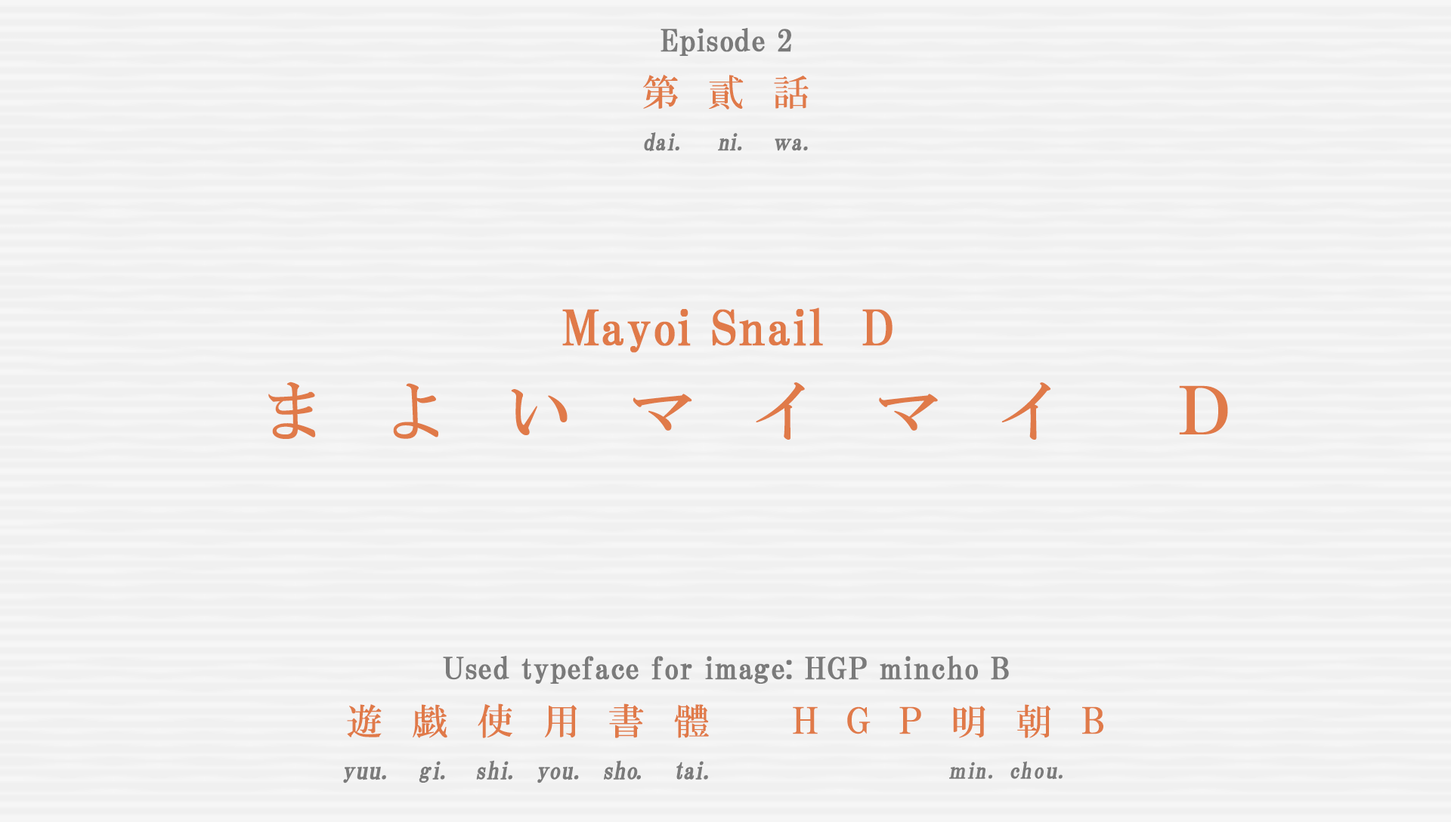
<style>
.page{position:relative;width:1451px;height:822px;background:#f0f0f0}
.page>*{position:absolute;margin:0}
.t1{font:30.2px "HGPMinchoB";letter-spacing:0.01em;color:#7a7a7a;font-weight:bold}
.t2{font:36.5px "HGMinchoB";letter-spacing:0.79em;color:#e07a49}
.t3{font:23.2px "HGMinchoB";letter-spacing:-0.1em;color:#7a7a7a;font-weight:bold;scale:0.96 1}
.t4{font:23.2px "HGMinchoB";color:#7a7a7a;font-weight:bold;scale:0.96 1}
.t5{font:23.2px "HGMinchoB";letter-spacing:-0.075em;color:#7a7a7a;font-weight:bold;scale:0.96 1}
.t6{font:23.2px "HGMinchoB";letter-spacing:0.07em;color:#7a7a7a;font-weight:bold;scale:0.96 1}
.t7{font:23.2px "HGMinchoB";letter-spacing:-0.05em;color:#7a7a7a;font-weight:bold;scale:0.86 1}
.t8{font:48.4px "HGPMinchoB";letter-spacing:0.01em;color:#e07a49;font-weight:bold}
.t9{font:65.7px "HGMinchoB";letter-spacing:0.87em;color:#e07a49}
.t10{font:36.3px "HGMinchoB";letter-spacing:0.81em;color:#e07a49}
.t11{font:36.3px "HGMinchoB";letter-spacing:0.8em;color:#e07a49}
.t12{font:36.3px "HGMinchoB";letter-spacing:0.79em;color:#e07a49}
.t13{font:36.3px "HGMinchoB";letter-spacing:0.71em;color:#e07a49;scale:0.85 1}
.t14{font:36.3px "HGMinchoB";letter-spacing:0.53em;color:#e07a49}
.t15{font:24.2px "HGMinchoB";color:#7a7a7a;font-weight:bold}
.t16{font:24.2px "HGMinchoB";letter-spacing:0.025em;color:#7a7a7a;font-weight:bold;scale:0.96 1}
.t17{font:24.2px "HGMinchoB";letter-spacing:0.075em;color:#7a7a7a;font-weight:bold;scale:0.96 1}
.t18{font:24.2px "HGMinchoB";letter-spacing:-0.025em;color:#7a7a7a;font-weight:bold;scale:0.96 1}
.t19{font:24.2px "HGMinchoB";letter-spacing:-0.11em;color:#7a7a7a;font-weight:bold;scale:0.96 1}
.t20{font:24.2px "HGMinchoB";color:#7a7a7a;font-weight:bold;scale:0.96 1}
.t21{font:24.2px "HGMinchoB";letter-spacing:-0.05em;color:#7a7a7a;font-weight:bold;scale:0.96 1}
.t22{font:24.2px "HGMinchoB";letter-spacing:-0.12em;color:#7a7a7a;font-weight:bold;scale:0.96 1}
.t23{font:24.2px "HGMinchoB";letter-spacing:-0.01em;color:#7a7a7a;font-weight:bold;scale:0.96 1}
.t24{font:24.2px "HGMinchoB";letter-spacing:0.005em;color:#7a7a7a;font-weight:bold;scale:0.96 1}
.t25{font:24.2px "HGMinchoB";letter-spacing:-0.09em;color:#7a7a7a;font-weight:bold;scale:0.96 1}
.t26{font:24.2px "HGMinchoB";letter-spacing:-0.075em;color:#7a7a7a;font-weight:bold;scale:0.96 1}
.t27{font:24.2px "HGMinchoB";letter-spacing:-0.1em;color:#7a7a7a;font-weight:bold;scale:0.96 1}
.t28{font:22px "HGMinchoB";letter-spacing:0.07em;color:#7a7a7a;font-weight:bold;scale:0.96 1}
.t29{font:22px "HGMinchoB";letter-spacing:-0.075em;color:#7a7a7a;font-weight:bold;scale:0.83 1}
.t30{font:22px "HGMinchoB";letter-spacing:-0.075em;color:#7a7a7a;font-weight:bold;scale:0.96 1}
.t31{font:22px "HGMinchoB";color:#7a7a7a;font-weight:bold;scale:0.96 1}
.t32{font:22px "HGMinchoB";letter-spacing:0.05em;color:#7a7a7a;font-weight:bold;scale:0.96 1}
.t33{font:22px "HGMinchoB";letter-spacing:0.01em;color:#7a7a7a;font-weight:bold;scale:1.06 1}
</style>
<div class="page">
<p class="t1" style="left:660px;top:28px;width:131px;height:28px">Episode 2</p>
<p class="t2" style="left:643px;top:75px;width:165px;height:35px">第貳話</p>
<p class="t3" style="left:644px;top:132px;width:164px;height:19px"><span class="t4">d</span><span class="t5">a</span>i<span class="t6">.  </span>ni<span class="t6">.  </span><span class="t7">ｗ</span><span class="t4">a</span><span class="t6">.</span></p>
<p class="t8" style="left:562px;top:308px;width:330px;height:45px">Mayoi Snail  D</p>
<p class="t9" style="left:268px;top:382px;width:960px;height:58px">まよいマイマイ Ｄ</p>
<p class="t1" style="left:443px;top:656px;width:566px;height:28px">Used typeface for image: HGP mincho B</p>
<p class="t10" style="left:347px;top:703px;width:362px;height:35px">遊<span class="t11">戯</span>使<span class="t12">用</span>書體</p>
<p class="t13" style="left:793px;top:706px;width:310px;height:28px">ＨＧＰ    Ｂ</p>
<p class="t12" style="left:953px;top:704px;width:97px;height:34px">明<span class="t14">朝</span></p>
<p class="t15" style="left:343px;top:760px;width:365px;height:23px"><span class="t16">y</span>uu<span class="t17">. </span><span class="t18">g</span><span class="t19">i</span><span class="t17">. </span><span class="t20">s</span><span class="t21">h</span><span class="t22">i</span><span class="t17">. </span><span class="t23">y</span><span class="t24">ou</span><span class="t17">. </span><span class="t18">s</span><span class="t20">h</span><span class="t25">o</span><span class="t17">.  </span><span class="t26">t</span><span class="t27">ai</span><span class="t17">.</span></p>
<p class="t28" style="left:949px;top:761px;width:113px;height:19px"><span class="t29">ｍ</span><span class="t30">i</span>n. <span class="t31">c</span>h<span class="t32">o</span><span class="t33">u</span>.</p>
</div>
